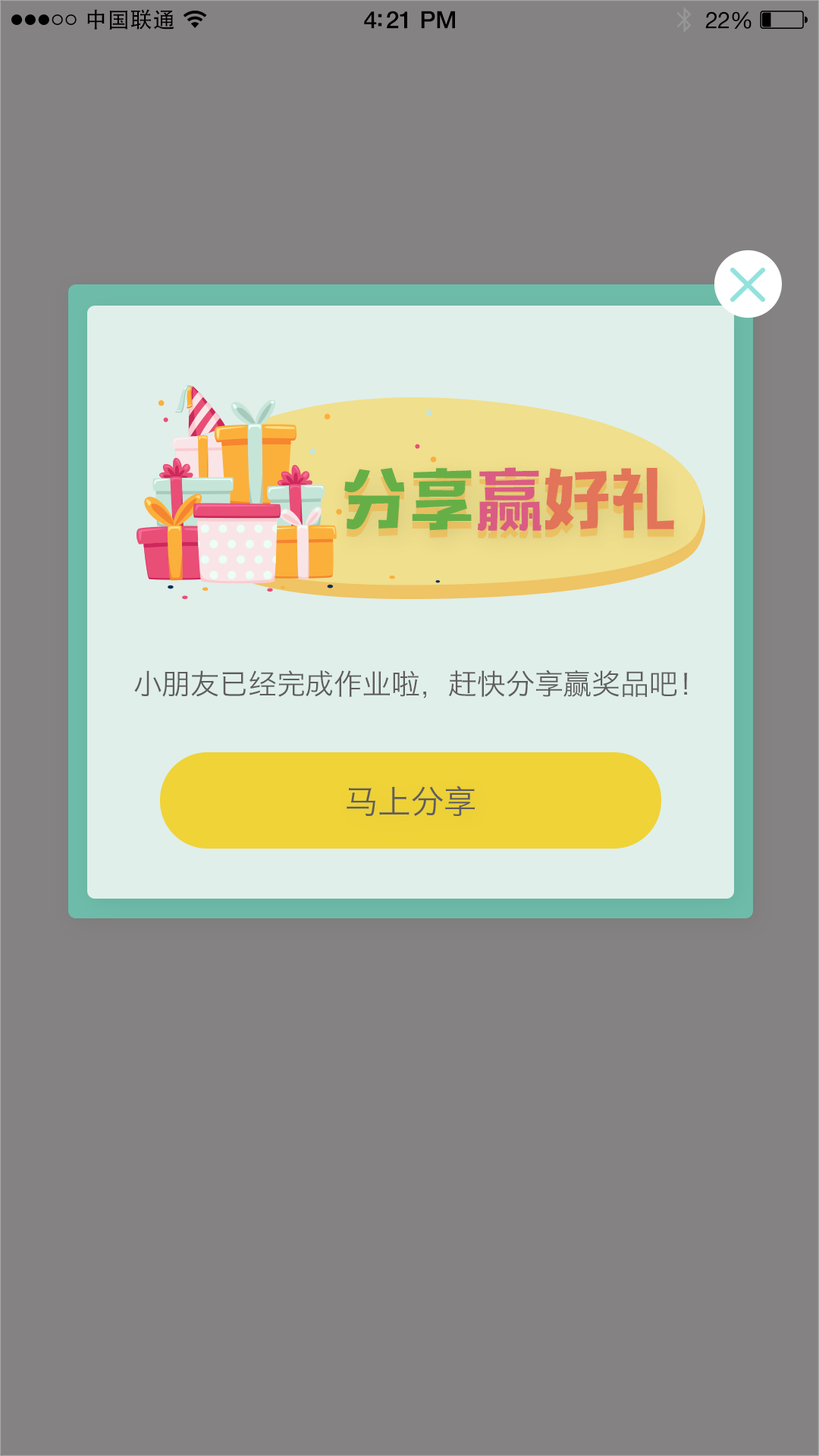
<style>
.page{position:relative;width:819px;height:1456px;background:#848282}
.page>*{position:absolute;margin:0}
.t1{font:22px "AdobeHeitiStd-Regular";letter-spacing:0.02em;color:#000000}
.t2{font:23.9px "HelveticaNeue-Medium";letter-spacing:-0.02em;color:#000000}
.t3{font:22.9px "HelveticaNeue";letter-spacing:-0.02em;color:#000000}
.t4{font:67.4px "MFTongXin_Noncommercial-Regular";color:#66af47}
.t5{font:67.4px "MFTongXin_Noncommercial-Regular";color:#da5c82}
.t6{font:67.4px "MFTongXin_Noncommercial-Regular";color:#e27459}
.t7{font:67.4px "MFTongXin_Noncommercial-Regular"}
.t8{font:28.8px "HiraginoSansGB-W3";letter-spacing:-0.006em;color:#5f5d5e}
.t9{font:32.7px "HiraginoSansGB-W3";color:#5f5d5e}
</style>
<div class="page">
<p class="t1" style="left:87px;top:9px;width:87px;height:21px">中国联通</p>
<p class="t2" style="left:364px;top:11px;width:91px;height:18px">4:21 PM</p>
<p class="t3" style="left:705px;top:11px;width:46px;height:18px">22%</p>
<p class="t4" style="left:344px;top:467px;width:330px;height:65px">分享<span class="t5">赢</span><span class="t6">好礼</span></p>
<p class="t7" style="left:344px;top:475px;width:330px;height:64px">分享赢好礼</p>
<p class="t8" style="left:134px;top:670px;width:553px;height:28px">小朋友已经完成作业啦，赶快分享赢奖品吧！</p>
<p class="t9" style="left:347px;top:786px;width:128px;height:30px">马上分享</p>
</div>
